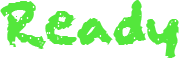
<style>
.page{position:relative;width:179px;height:58px;background:#ffffff}
.page>*{position:absolute;margin:0}
.t1{font:50px "squeakychalksound";color:#54e73c}
</style>
<div class="page">
<p class="t1" style="left:0px;top:0px;width:179px;height:58px">Ready</p>
</div>
